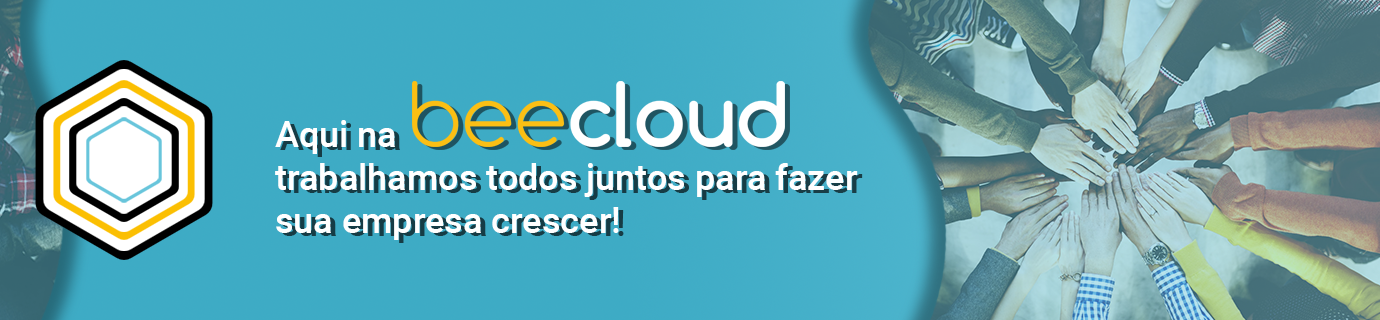
<style>
.page{position:relative;width:1380px;height:320px;background:#3eabc5}
.page>*{position:absolute;margin:0}
.t1{font:36px "Roboto-Medium";color:#ffffff}
</style>
<div class="page">
<p class="t1" style="left:275px;top:120px;width:583px;height:120px">Aqui na<br>trabalhamos todos juntos para fazer<br>sua empresa crescer!</p>
</div>
